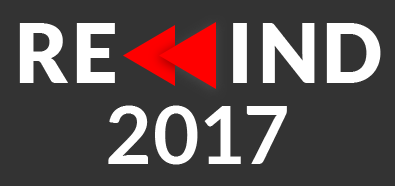
<style>
.page{position:relative;width:395px;height:186px;background:#333333}
.page>*{position:absolute;margin:0}
.t1{font:81px "Lato-Black";letter-spacing:0.02em;color:#ffffff}
.t2{font:81px "Lato-Black";letter-spacing:0.04em;color:#ffffff}
.t3{font:80px "Lato-Bold";letter-spacing:-0.02em;color:#ffffff}
</style>
<div class="page">
<p class="t1" style="left:19px;top:23px;width:96px;height:60px">RE</p>
<p class="t2" style="left:233px;top:23px;width:148px;height:60px">IND</p>
<p class="t3" style="left:108px;top:105px;width:179px;height:60px">2017</p>
</div>
